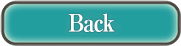
<style>
.page{position:relative;width:181px;height:46px;background:#239e9f}
.page>*{position:absolute;margin:0}
.t1{font:24px "RyuminPro-ExBold";letter-spacing:-0.08em;color:#ffffff;scale:0.9 1}
</style>
<div class="page">
<p class="t1" style="left:68px;top:13px;width:47px;height:19px">Back</p>
</div>
